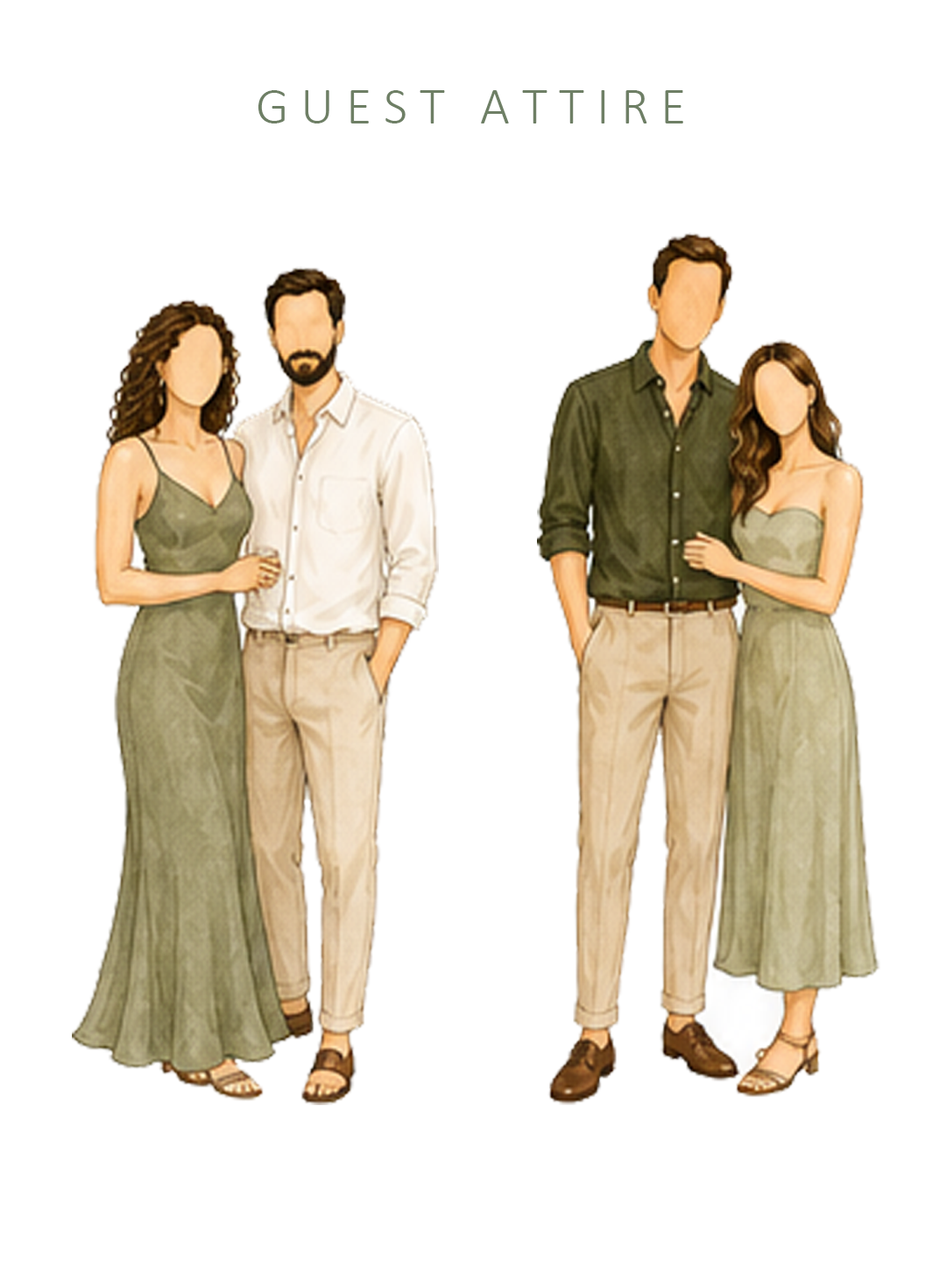
<style>
.page{position:relative;width:946px;height:1261px;background:#ffffff}
.page>*{position:absolute;margin:0}
.t1{font:52.5px "Calibri-Light";color:#6e7f65}
</style>
<div class="page">
<p class="t1" style="left:258px;top:90px;width:425px;height:33px">G U E S T   A T T I R E</p>
</div>
